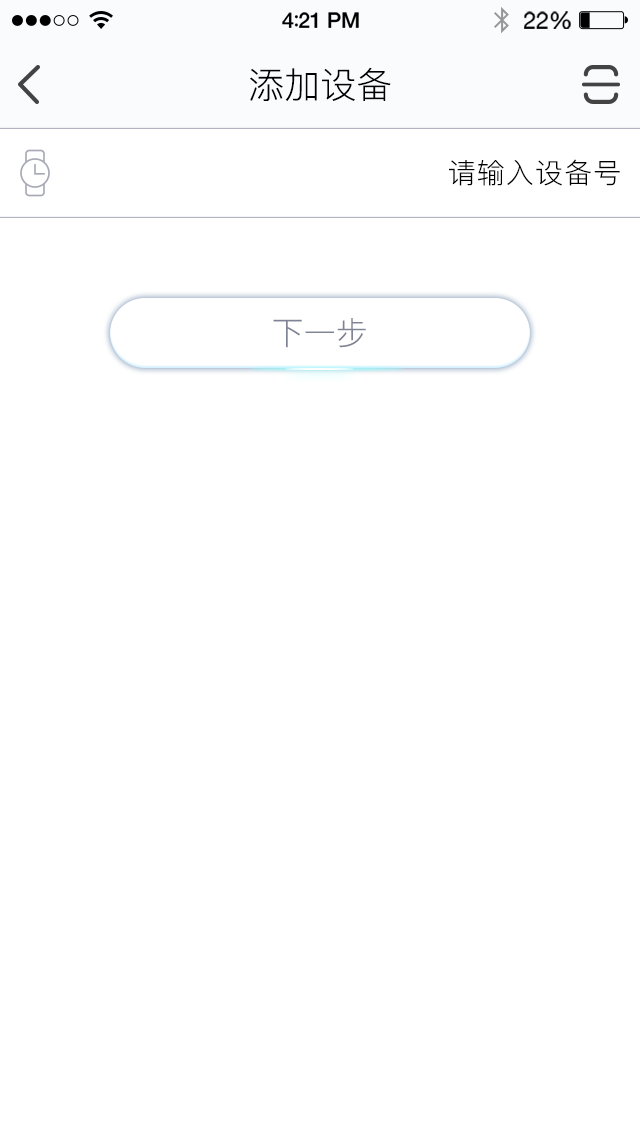
<style>
.page{position:relative;width:640px;height:1136px;background:#ffffff}
.page>*{position:absolute;margin:0}
.t1{font:36px "PingFang-SC-Regular";color:#000000}
.t2{font:28px "PingFang-SC-Regular";letter-spacing:0.04em;color:#000000}
.t3{font:32px "PingFang-SC-Regular";color:#7f8393}
</style>
<div class="page">
<p class="t1" style="left:250px;top:67px;width:141px;height:34px">添加设备</p>
<p class="t2" style="left:449px;top:159px;width:171px;height:27px">请输入设备号</p>
<p class="t3" style="left:273px;top:318px;width:93px;height:30px">下一步</p>
</div>
